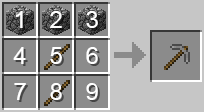
<style>
.page{position:relative;width:204px;height:112px;background:#8b8b8b}
.page>*{position:absolute;margin:0}
.t1{font:24px "ArialMT";color:#ffffff}
</style>
<div class="page">
<p class="t1" style="left:16px;top:11px;width:7px;height:17px">1</p>
<p class="t1" style="left:50px;top:11px;width:12px;height:17px">2</p>
<p class="t1" style="left:86px;top:11px;width:12px;height:17px">3</p>
<p class="t1" style="left:13px;top:47px;width:13px;height:17px">4</p>
<p class="t1" style="left:50px;top:47px;width:12px;height:17px">5</p>
<p class="t1" style="left:86px;top:47px;width:12px;height:17px">6</p>
<p class="t1" style="left:14px;top:83px;width:12px;height:17px">7</p>
<p class="t1" style="left:50px;top:83px;width:12px;height:17px">8</p>
<p class="t1" style="left:86px;top:83px;width:12px;height:17px">9</p>
</div>
